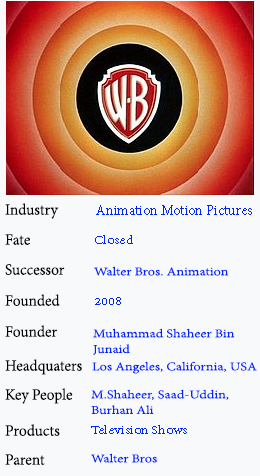
<style>
.page{position:relative;width:260px;height:476px;background:#f8f9fa}
.page>*{position:absolute;margin:0}
.t1{font:17px "AdobeDevanagari-Regular";color:#000000;scale:0.97 1}
.t2{font:16.2px "AdobeDevanagari-Regular";color:#0024ff;scale:0.94 1}
.t3{font:13px "AdobeDevanagari-Regular";color:#0024ff;scale:1.17 1}
</style>
<div class="page">
<p class="t1" style="left:5px;top:203px;width:54px;height:16px">Industry</p>
<p class="t2" style="left:96px;top:205px;width:156px;height:10px">Animation Motion Pictures</p>
<p class="t1" style="left:5px;top:234px;width:25px;height:11px">Fate</p>
<p class="t3" style="left:95px;top:235px;width:38px;height:9px">Closed</p>
<p class="t1" style="left:5px;top:264px;width:60px;height:11px">Successor</p>
<p class="t3" style="left:94px;top:266px;width:135px;height:10px">Walter Bros. Animation</p>
<p class="t1" style="left:5px;top:294px;width:55px;height:12px">Founded</p>
<p class="t3" style="left:95px;top:297px;width:26px;height:8px">2008</p>
<p class="t1" style="left:5px;top:325px;width:53px;height:12px">Founder</p>
<p class="t3" style="left:93px;top:328px;width:142px;height:27px">Muhammad Shaheer Bin <br>Junaid</p>
<p class="t1" style="left:5px;top:359px;width:77px;height:16px">Headquaters</p>
<p class="t3" style="left:92px;top:361px;width:165px;height:13px">Los Angeles, California, USA</p>
<p class="t1" style="left:5px;top:388px;width:68px;height:16px">Key People</p>
<p class="t3" style="left:91px;top:389px;width:138px;height:26px">M.Shaheer, Saad-Uddin,<br>Burhan Ali</p>
<p class="t1" style="left:5px;top:424px;width:55px;height:12px">Products</p>
<p class="t3" style="left:91px;top:425px;width:96px;height:9px">Television Shows</p>
<p class="t1" style="left:5px;top:454px;width:40px;height:11px">Parent</p>
<p class="t3" style="left:91px;top:453px;width:66px;height:10px">Walter Bros</p>
</div>
